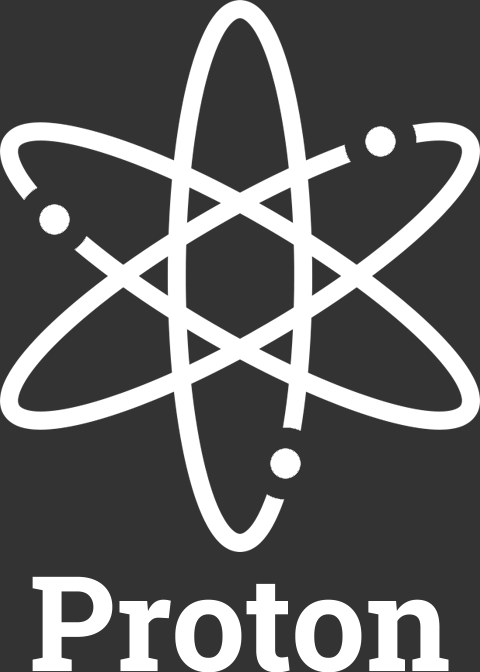
<style>
.page{position:relative;width:480px;height:672px;background:#333333}
.page>*{position:absolute;margin:0}
.t1{font:132.5px "RobotoSlab-Bold";color:#ffffff}
</style>
<div class="page">
<p class="t1" style="left:32px;top:576px;width:417px;height:97px">Proton</p>
</div>
